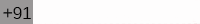
<style>
.page{position:relative;width:200px;height:24px;background:#fefdfd}
.page>*{position:absolute;margin:0}
.t1{font:17.3px "Kalinga";color:#010101}
</style>
<div class="page">
<p class="t1" style="left:3px;top:7px;width:28px;height:12px">+91</p>
</div>
